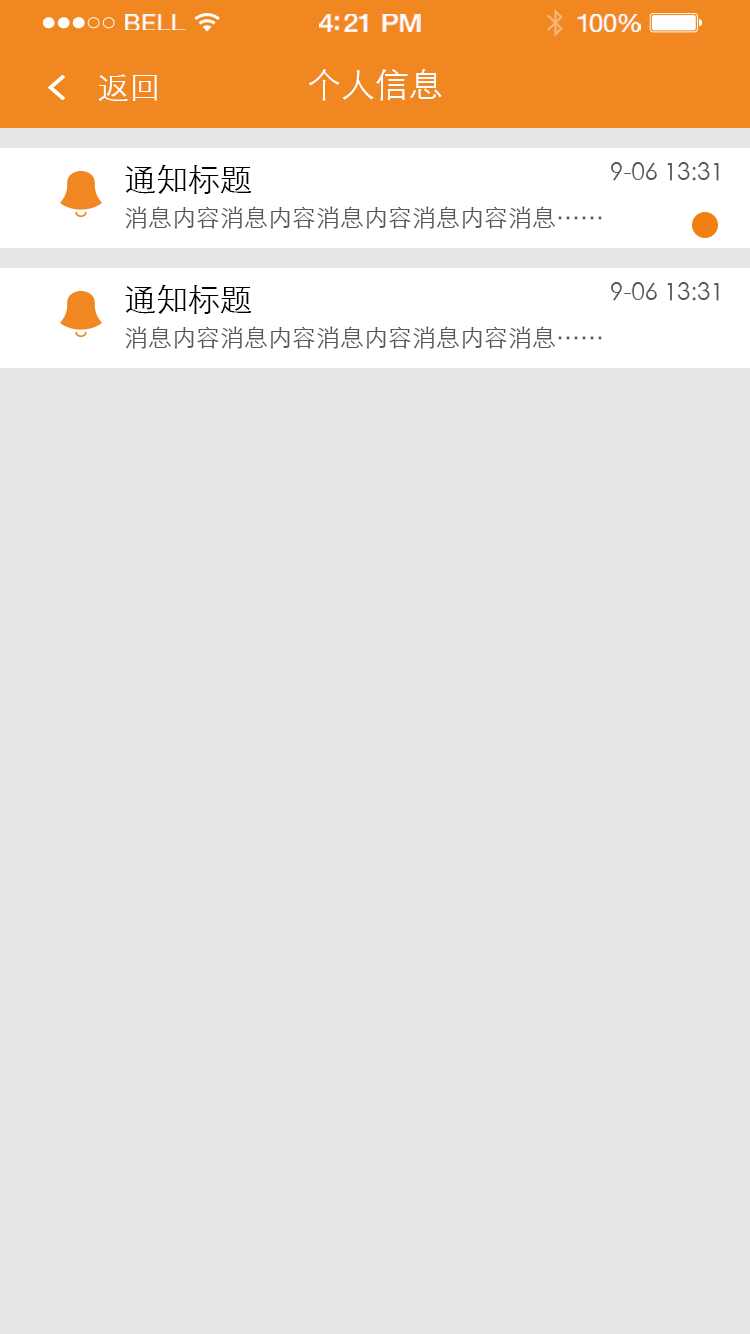
<style>
.page{position:relative;width:750px;height:1334px;background:#e6e6e6}
.page>*{position:absolute;margin:0}
.t1{font:23.3px "HelveticaNeue";letter-spacing:0.02em;color:#ffffff;scale:1.06 1}
.t2{font:25.3px "HelveticaNeue-Medium";letter-spacing:-0.02em;color:#ffffff;scale:1.06 1}
.t3{font:24.3px "HelveticaNeue";letter-spacing:-0.02em;color:#ffffff;scale:1.06 1}
.t4{font:32px "STXihei";color:#ffffff}
.t5{font:34px "STXihei";color:#ffffff}
.t6{font:32px "STXihei";color:#000000}
.t7{font:24px "STXihei";color:#595757}
</style>
<div class="page">
<p class="t1" style="left:125px;top:14px;width:61px;height:16px">BELL</p>
<p class="t2" style="left:319px;top:14px;width:102px;height:18px">4:21 PM</p>
<p class="t3" style="left:577px;top:14px;width:64px;height:18px">100%</p>
<p class="t4" style="left:98px;top:74px;width:59px;height:27px">返回</p>
<p class="t5" style="left:308px;top:69px;width:134px;height:32px">个人信息</p>
<p class="t6" style="left:125px;top:164px;width:127px;height:30px">通知标题</p>
<p class="t7" style="left:611px;top:162px;width:108px;height:19px">9-06 13:31</p>
<p class="t7" style="left:125px;top:206px;width:477px;height:23px">消息内容消息内容消息内容消息内容消息……</p>
<p class="t6" style="left:125px;top:284px;width:127px;height:30px">通知标题</p>
<p class="t7" style="left:611px;top:282px;width:108px;height:19px">9-06 13:31</p>
<p class="t7" style="left:125px;top:326px;width:477px;height:23px">消息内容消息内容消息内容消息内容消息……</p>
</div>
